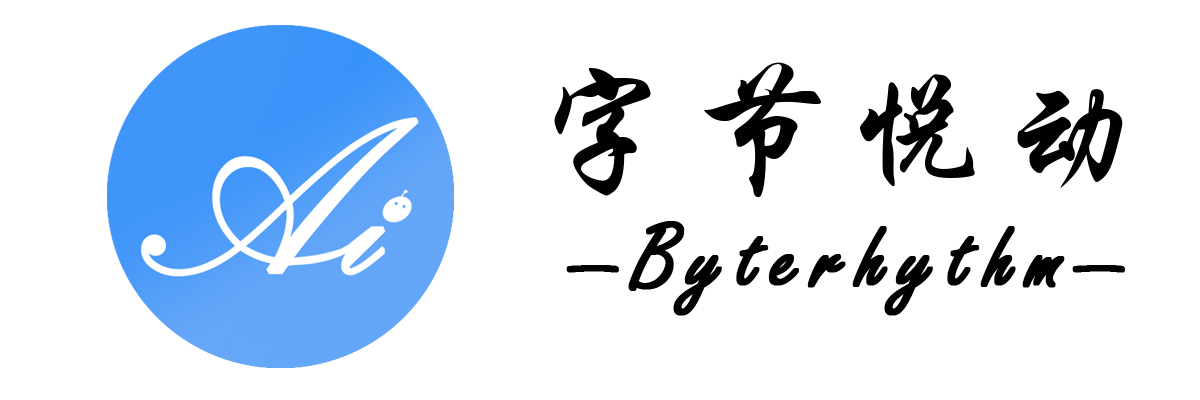
<style>
.page{position:relative;width:1200px;height:400px;background:#ffffff}
.page>*{position:absolute;margin:0}
.t1{font:140px "STXingkai";letter-spacing:0.1em;color:#000102}
.t2{font:100px "FreestyleScript-Regular";letter-spacing:0.1em;color:#000102;font-weight:bold}
</style>
<div class="page">
<p class="t1" style="left:554px;top:62px;width:569px;height:136px">字节悦动</p>
<p class="t2" style="left:566px;top:221px;width:559px;height:95px">—Byterhythm—</p>
</div>
